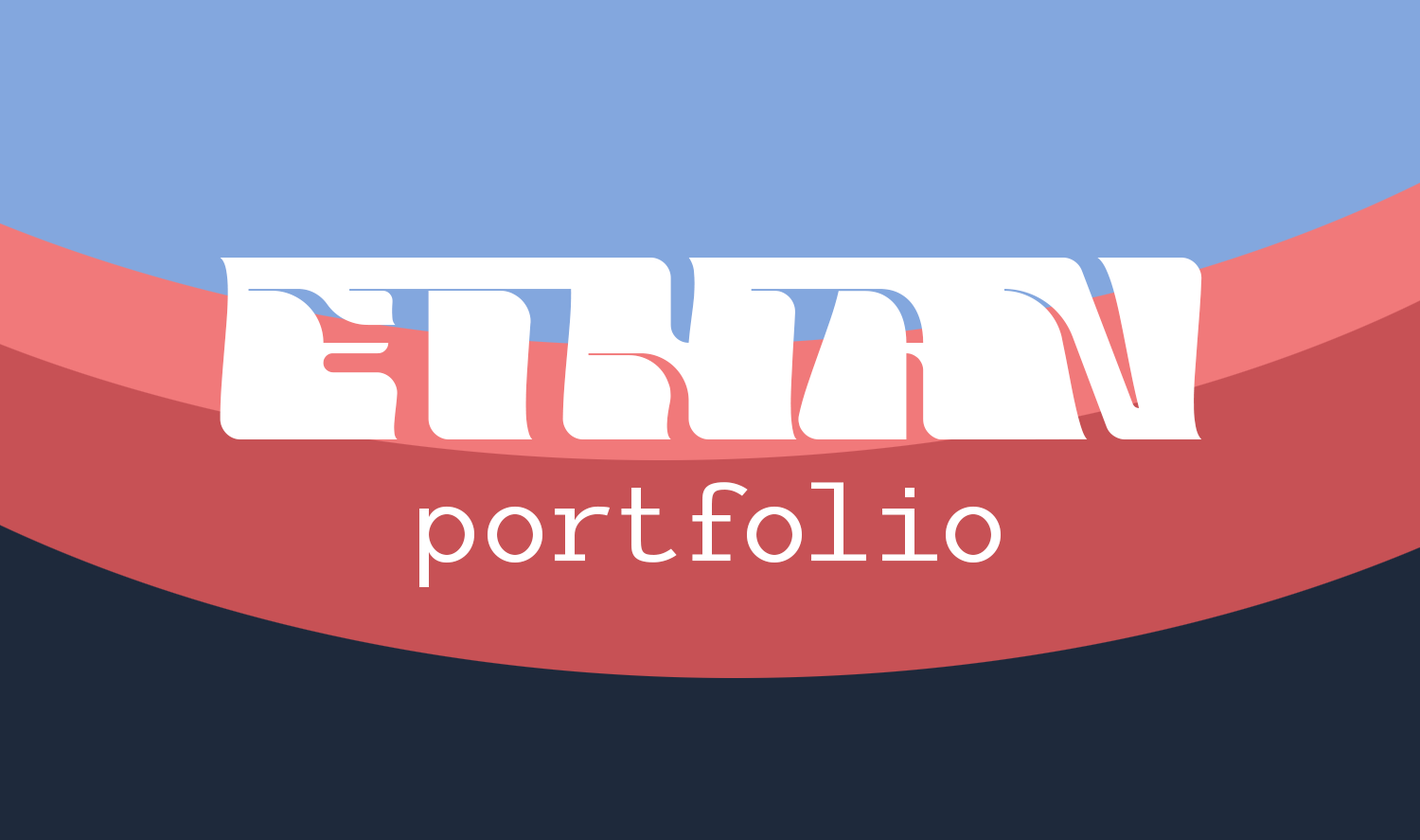
<style>
.page{position:relative;width:1420px;height:840px;background:#83a7de}
.page>*{position:absolute;margin:0}
.t1{font:182.2px "MEDIUMUNIQUEDEMO-BOLD";letter-spacing:-0.32em;color:#ffffff}
.t2{font:182.2px "MEDIUMUNIQUEDEMO-BOLD";letter-spacing:-0.12em;color:#ffffff}
.t3{font:104.1px "LivemonoDemo";color:#ffffff}
</style>
<div class="page">
<p class="t1" style="left:220px;top:258px;width:982px;height:181px"><span class="t2">ET</span>HAN</p>
<p class="t3" style="left:419px;top:482px;width:582px;height:105px">portfolio</p>
</div>
